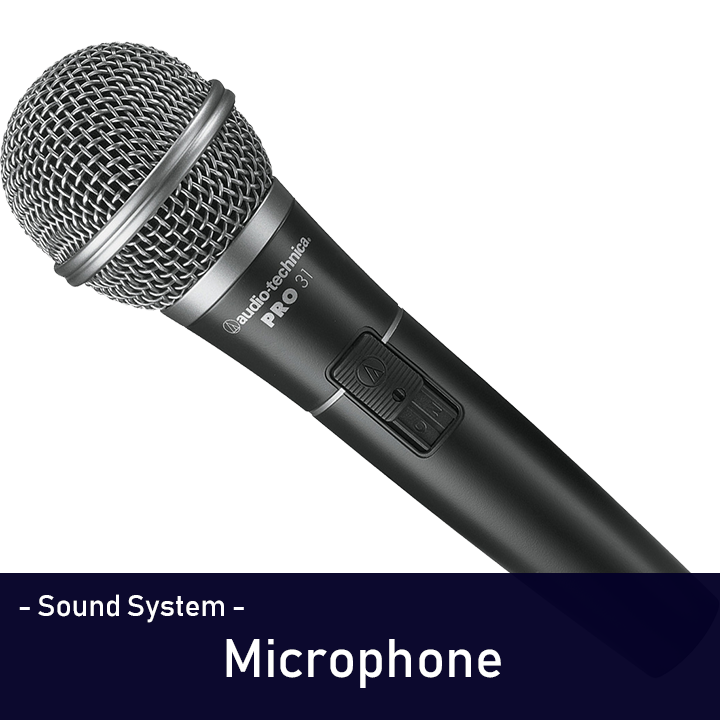
<style>
.page{position:relative;width:720px;height:720px;background:#ffffff}
.page>*{position:absolute;margin:0}
.t1{font:30px "Bahnschrift";color:#ffffff}
.t2{font:53.6px "Bahnschrift";color:#ffffff}
</style>
<div class="page">
<p class="t1" style="left:19px;top:594px;width:225px;height:29px">- Sound System -</p>
<p class="t2" style="left:226px;top:639px;width:275px;height:49px">Microphone</p>
</div>
